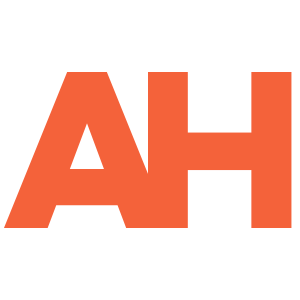
<style>
.page{position:relative;width:300px;height:300px;background:#ffffff}
.page>*{position:absolute;margin:0}
.t1{font:200px "LuloCleanW01-OneBold";letter-spacing:-0.4em;color:#f4623a}
</style>
<div class="page">
<p class="t1" style="left:4px;top:72px;width:288px;height:156px">AH</p>
</div>
